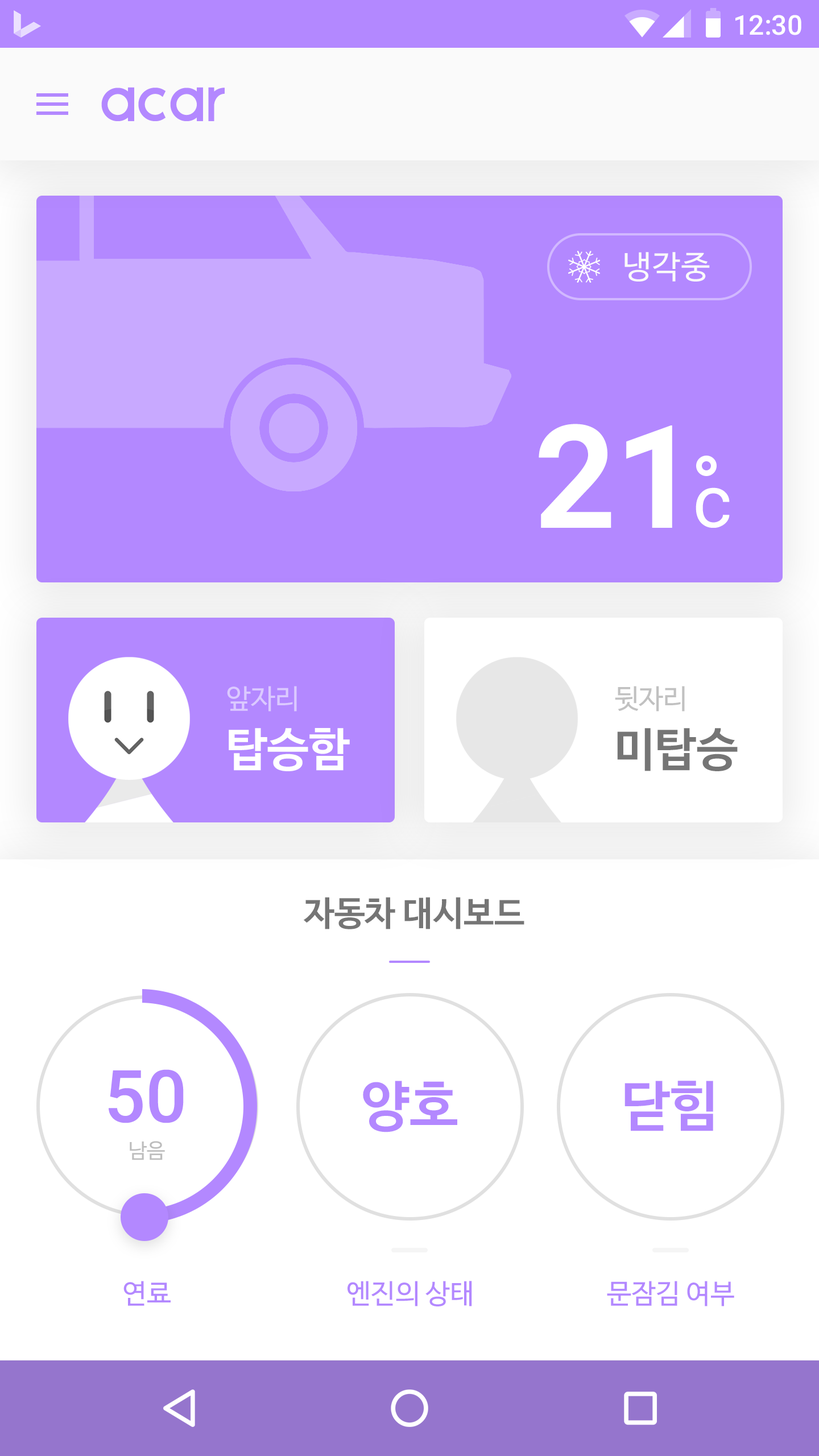
<style>
.page{position:relative;width:819px;height:1456px;background:#ffffff}
.page>*{position:absolute;margin:0}
.t1{font:27.3px "Roboto-Medium";color:#ffffff}
.t2{font:31.8px "NanumBarunGothic";letter-spacing:0.025em;color:#fafafa}
.t3{font:143.9px "RobotoMono-Bold";letter-spacing:-0.04em;color:#ffffff}
.t4{font:27.3px "NanumBarunGothic";color:#dbc9ff}
.t5{font:27.3px "NanumBarunGothic";color:#c1c1c1}
.t6{font:46.1px "NanumBarunGothicBold";color:#ffffff}
.t7{font:46.1px "NanumBarunGothicBold";color:#757575}
.t8{font:34.1px "NanumBarunGothicBold";color:#757575}
.t9{font:72.8px "Roboto-Medium";color:#b388ff}
.t10{font:54.6px "NanumBarunGothicBold";color:#b388ff}
.t11{font:20.5px "NanumBarunGothic";color:#bdbdbd}
.t12{font:27.3px "NanumBarunGothic";color:#b388ff}
</style>
<div class="page">
<p class="t1" style="left:735px;top:15px;width:66px;height:20px">12:30</p>
<p class="t2" style="left:624px;top:252px;width:86px;height:30px">냉각중</p>
<p class="t3" style="left:539px;top:424px;width:133px;height:104px">21</p>
<p class="t4" style="left:227px;top:686px;width:70px;height:25px">앞자리</p>
<p class="t5" style="left:615px;top:686px;width:70px;height:25px">뒷자리</p>
<p class="t6" style="left:229px;top:728px;width:121px;height:43px">탑승함</p>
<p class="t7" style="left:617px;top:728px;width:121px;height:43px">미탑승</p>
<p class="t8" style="left:304px;top:897px;width:220px;height:32px">자동차 대시보드</p>
<p class="t9" style="left:109px;top:1069px;width:75px;height:54px">50</p>
<p class="t10" style="left:363px;top:1081px;width:94px;height:51px">양호</p>
<p class="t10" style="left:624px;top:1081px;width:89px;height:50px">닫힘</p>
<p class="t11" style="left:130px;top:1141px;width:35px;height:19px">남음</p>
<p class="t12" style="left:123px;top:1281px;width:48px;height:25px">연료</p>
<p class="t12" style="left:348px;top:1281px;width:124px;height:25px">엔진의 상태</p>
<p class="t12" style="left:607px;top:1281px;width:127px;height:25px">문잠김 여부</p>
</div>
